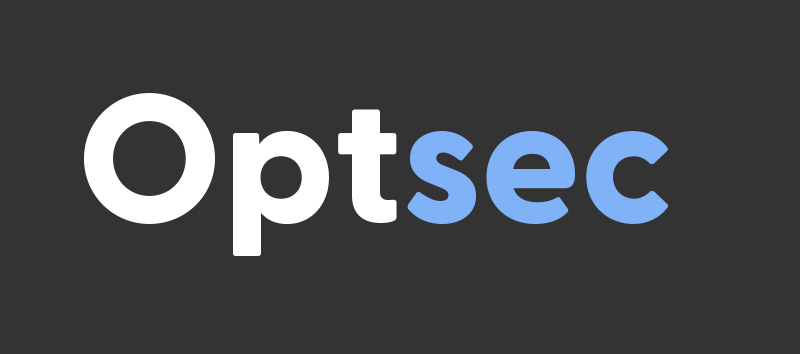
<style>
.page{position:relative;width:800px;height:354px;background:#333333}
.page>*{position:absolute;margin:0}
.t1{font:181.1px "GreycliffCF-ExtraBold";color:#ffffff}
.t2{font:181.1px "GreycliffCF-ExtraBold";color:#7fb2f7}
</style>
<div class="page">
<p class="t1" style="left:84px;top:93px;width:585px;height:163px">Opt<span class="t2">sec</span></p>
</div>
